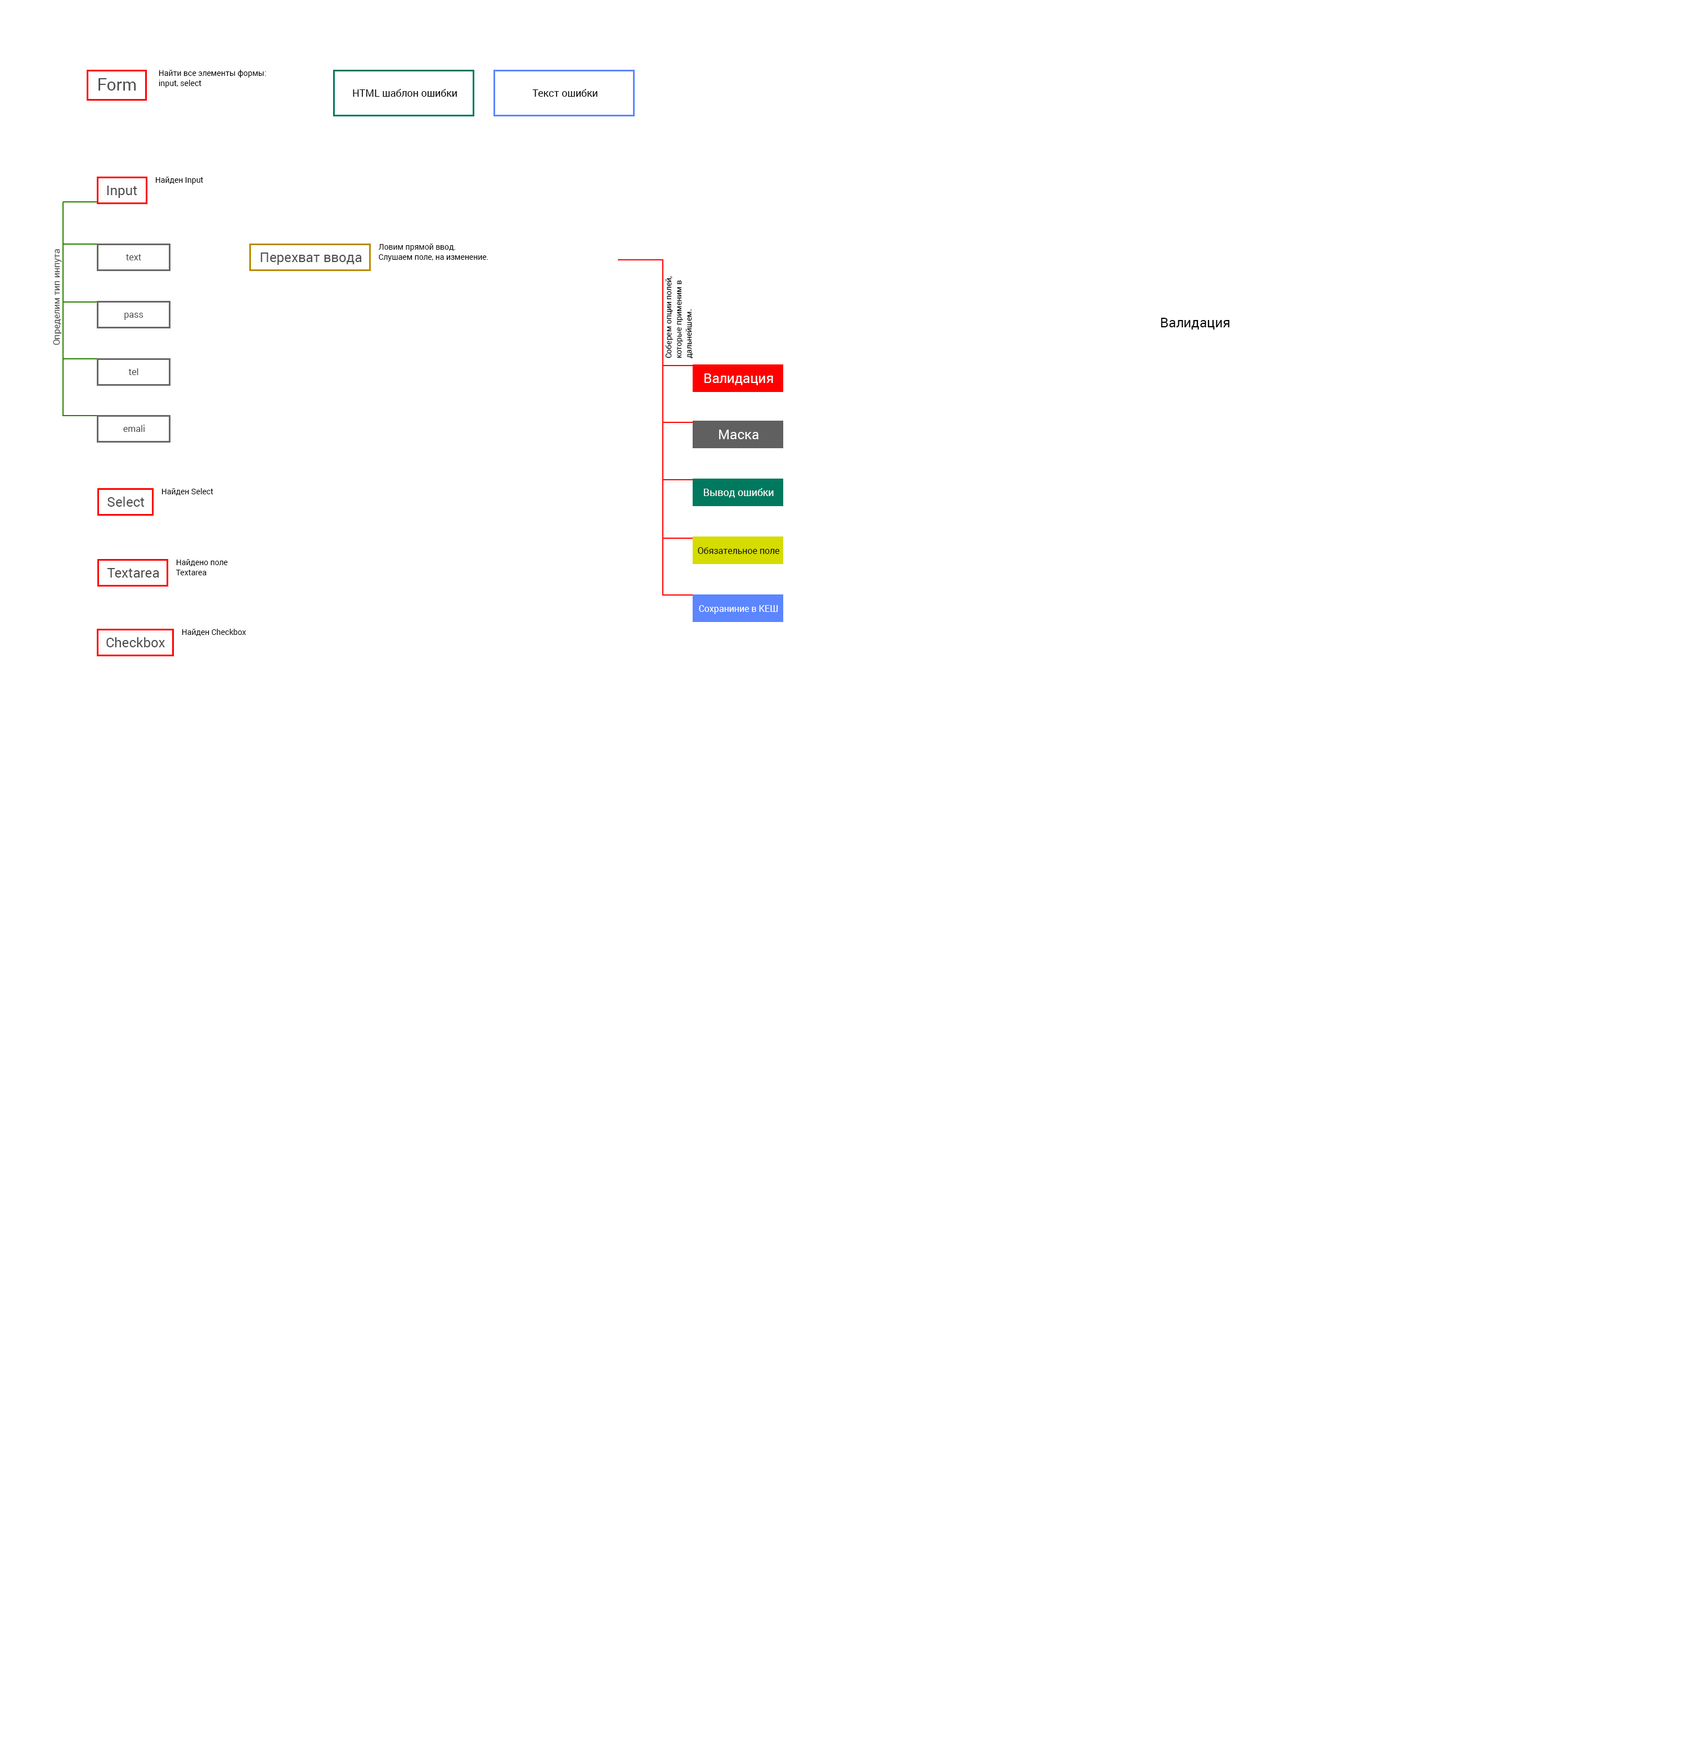
<style>
.page{position:relative;width:1688px;height:1740px;background:#ffffff}
.page>*{position:absolute;margin:0}
.t1{font:7.9px/10.1px "Roboto-Regular";color:#000000}
.t2{font:16.9px "Roboto-Regular";color:#4e4e4e}
.t3{font:10.1px "Roboto-Regular";color:#000000}
.t4{font:13.5px "Roboto-Regular";color:#4e4e4e}
.t5{font:7.9px "Roboto-Regular";color:#000000}
.t6{font:9px "Roboto-Regular";color:#4e4e4e}
.t7{font:13.5px "Roboto-Regular";color:#000000}
.t8{font:13.5px "Roboto-Regular";color:#ffffff}
.t9{font:10.1px "Roboto-Regular";color:#ffffff}
.t10{font:9px "Roboto-Regular";color:#121212}
.t11{font:9px "Roboto-Regular";color:#ffffff}
</style>
<div class="page">
<p class="t1" style="left:159px;top:70px;width:107px;height:18px">Найти все элементы формы: input, select</p>
<p class="t2" style="left:98px;top:78px;width:38px;height:13px">Form</p>
<p class="t3" style="left:353px;top:89px;width:104px;height:8px">HTML шаблон ошибки</p>
<p class="t3" style="left:532px;top:89px;width:65px;height:8px">Текст ошибки</p>
<p class="t4" style="left:107px;top:186px;width:30px;height:12px">Input</p>
<p class="t5" style="left:155px;top:177px;width:48px;height:7px">Найден Input</p>
<p class="t1" style="left:379px;top:244px;width:109px;height:18px">Ловим прямой ввод.<br>Слушаем поле, на изменение.</p>
<p class="t6" style="left:53px;top:249px;width:9px;height:96px;rotate:-90deg">Определим тип инпута</p>
<p class="t6" style="left:125px;top:254px;width:16px;height:6px">text</p>
<p class="t4" style="left:260px;top:253px;width:102px;height:12px">Перехват ввода</p>
<p class="t5" style="left:665px;top:276px;width:28px;height:82px;rotate:-90deg">Соберем опции полей, которые применим в дальнейшем.</p>
<p class="t6" style="left:124px;top:313px;width:19px;height:7px">pass</p>
<p class="t7" style="left:1160px;top:318px;width:69px;height:12px">Валидация</p>
<p class="t6" style="left:128px;top:368px;width:10px;height:7px">tel</p>
<p class="t8" style="left:704px;top:374px;width:69px;height:11px">Валидация</p>
<p class="t6" style="left:123px;top:425px;width:22px;height:7px">emali</p>
<p class="t8" style="left:719px;top:430px;width:39px;height:9px">Маска</p>
<p class="t4" style="left:107px;top:497px;width:38px;height:10px">Select</p>
<p class="t5" style="left:161px;top:488px;width:52px;height:8px">Найден Select</p>
<p class="t9" style="left:704px;top:488px;width:69px;height:10px">Вывод ошибки</p>
<p class="t10" style="left:698px;top:547px;width:81px;height:7px">Обязательное поле</p>
<p class="t4" style="left:107px;top:568px;width:52px;height:10px">Textarea</p>
<p class="t1" style="left:176px;top:559px;width:52px;height:16px">Найдено поле<br>Textarea</p>
<p class="t11" style="left:699px;top:605px;width:79px;height:9px">Сохраниние в КЕШ</p>
<p class="t5" style="left:182px;top:629px;width:64px;height:7px">Найден Checkbox</p>
<p class="t4" style="left:106px;top:637px;width:59px;height:10px">Checkbox</p>
</div>
